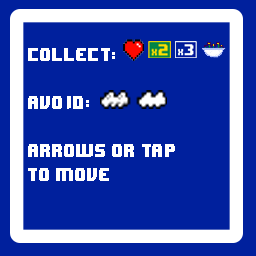
<style>
.page{position:relative;width:256px;height:256px;background:#00209d}
.page>*{position:absolute;margin:0}
.t1{font:20px "8-Bit-Nog";letter-spacing:0.016em;color:#ffffff}
</style>
<div class="page">
<p class="t1" style="left:28px;top:48px;width:147px;height:133px">Collect:<br><br>Avoid:<br><br>Arrows or Tap <br>to Move</p>
</div>
